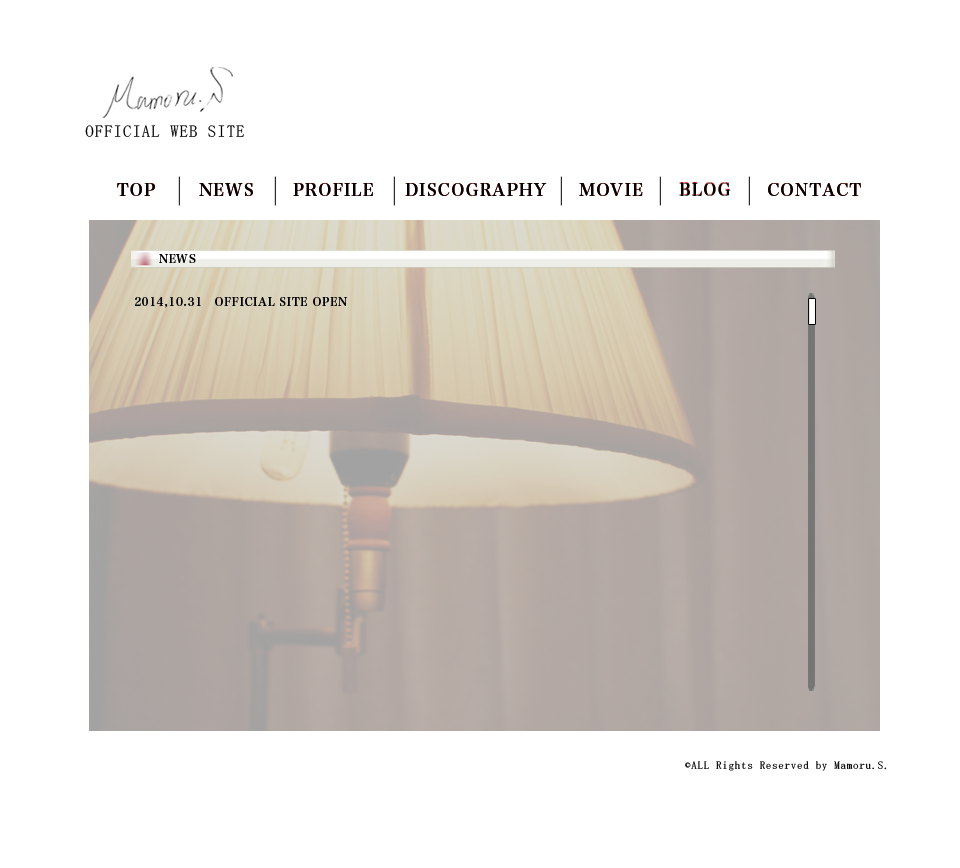
<style>
.page{position:relative;width:960px;height:868px;background:#ffffff}
.page>*{position:absolute;margin:0}
.t1{font:16.8px "MS-Mincho";letter-spacing:0.06em;color:#000000}
.t2{font:16.7px "HiraMinProN-W6";letter-spacing:0.06em;color:#000000}
.t3{font:11.1px "HiraMinProN-W6";letter-spacing:0.06em;color:#000000}
.t4{font:11.1px "MS-Mincho";letter-spacing:0.06em;color:#000000}
</style>
<div class="page">
<p class="t1" style="left:85px;top:125px;width:159px;height:12px">OFFICIAL WEB SITE</p>
<p class="t2" style="left:117px;top:183px;width:38px;height:13px">TOP</p>
<p class="t2" style="left:117px;top:183px;width:38px;height:13px">TOP</p>
<p class="t2" style="left:199px;top:183px;width:54px;height:13px">NEWS</p>
<p class="t2" style="left:199px;top:183px;width:54px;height:13px">NEWS</p>
<p class="t2" style="left:293px;top:183px;width:80px;height:13px">PROFILE</p>
<p class="t2" style="left:293px;top:183px;width:80px;height:13px">PROFILE</p>
<p class="t2" style="left:405px;top:183px;width:142px;height:13px">DISCOGRAPHY</p>
<p class="t2" style="left:405px;top:183px;width:142px;height:13px">DISCOGRAPHY</p>
<p class="t2" style="left:579px;top:183px;width:64px;height:13px">MOVIE</p>
<p class="t2" style="left:579px;top:183px;width:64px;height:13px">MOVIE</p>
<p class="t2" style="left:679px;top:182px;width:52px;height:13px">BLOG</p>
<p class="t2" style="left:679px;top:183px;width:52px;height:13px">BLOG</p>
<p class="t2" style="left:768px;top:183px;width:93px;height:13px">CONTACT</p>
<p class="t2" style="left:768px;top:183px;width:93px;height:13px">CONTACT</p>
<p class="t3" style="left:159px;top:254px;width:37px;height:9px">NEWS</p>
<p class="t3" style="left:135px;top:297px;width:213px;height:11px">2014,10.31　OFFICIAL SITE OPEN</p>
<p class="t4" style="left:685px;top:761px;width:202px;height:10px">©ALL Rights Reserved by Mamoru.S.</p>
</div>
